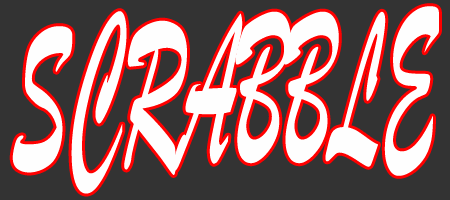
<style>
.page{position:relative;width:450px;height:200px;background:#333333}
.page>*{position:absolute;margin:0}
.t1{font:226.8px "BrushScriptMT";color:#fefefe;scale:0.39 1}
</style>
<div class="page">
<p class="t1" style="left:12px;top:6px;width:427px;height:188px">SCRABBLE</p>
</div>
